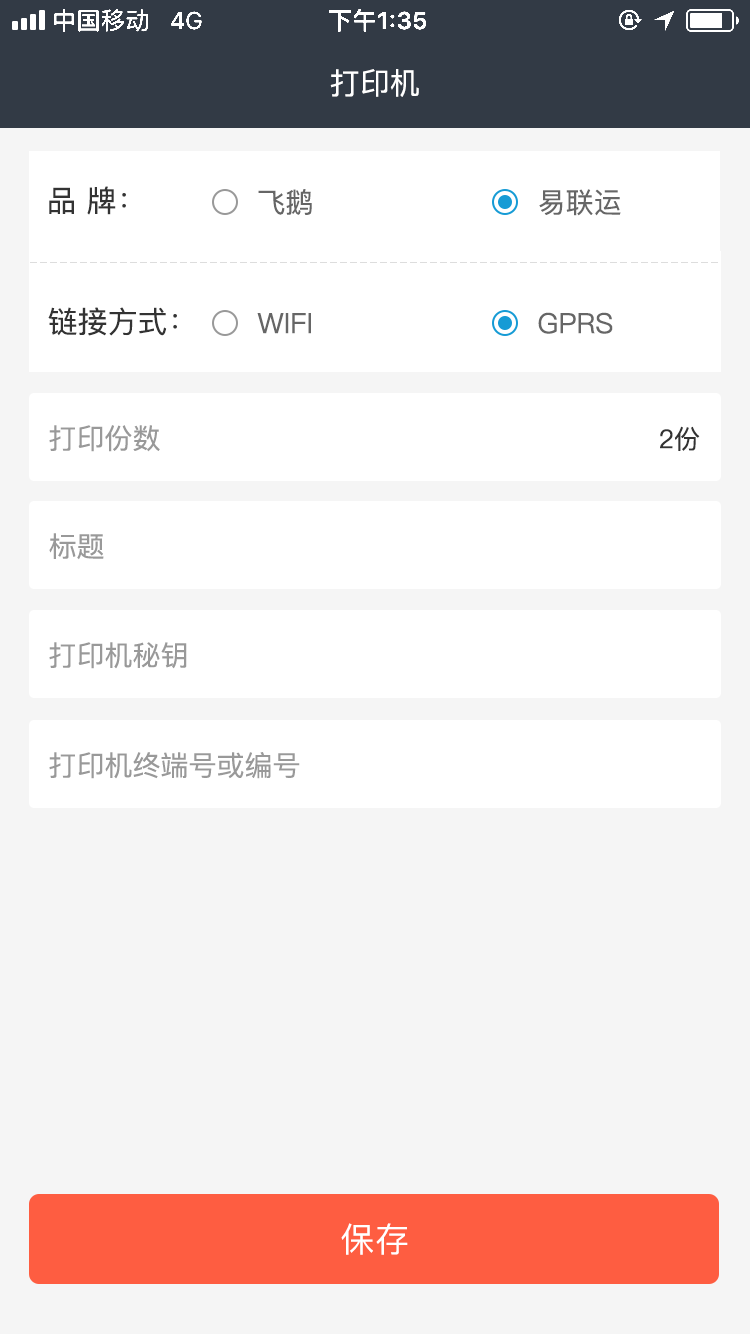
<style>
.page{position:relative;width:750px;height:1334px;background:#f5f5f5}
.page>*{position:absolute;margin:0}
.t1{font:30px "PingFang-SC-Medium";color:#ffffff}
.t2{font:30px "PingFang-SC-Medium";color:#333333}
.t3{font:28px "PingFang-SC-Medium";color:#666666}
.t4{font:28px "PingFang-SC-Medium";color:#999999}
.t5{font:26px "PingFang-SC-Medium";color:#333333}
.t6{font:34px "PingFang-SC-Medium";letter-spacing:0.02em;color:#ffffff}
</style>
<div class="page">
<p class="t1" style="left:330px;top:69px;width:89px;height:28px">打印机</p>
<p class="t2" style="left:49px;top:186px;width:77px;height:29px">品 牌：</p>
<p class="t3" style="left:258px;top:189px;width:54px;height:26px">飞鹅</p>
<p class="t3" style="left:539px;top:189px;width:82px;height:27px">易联运</p>
<p class="t2" style="left:48px;top:307px;width:129px;height:29px">链接方式：</p>
<p class="t3" style="left:257px;top:313px;width:54px;height:21px">WIFI</p>
<p class="t3" style="left:538px;top:312px;width:75px;height:22px">GPRS</p>
<p class="t4" style="left:49px;top:425px;width:111px;height:27px">打印份数</p>
<p class="t5" style="left:660px;top:426px;width:40px;height:25px">2份</p>
<p class="t4" style="left:49px;top:533px;width:55px;height:27px">标题</p>
<p class="t4" style="left:49px;top:642px;width:138px;height:27px">打印机秘钥</p>
<p class="t4" style="left:49px;top:752px;width:251px;height:27px">打印机终端号或编号</p>
<p class="t6" style="left:341px;top:1223px;width:67px;height:32px">保存</p>
</div>
